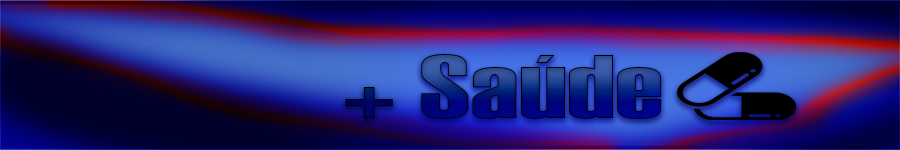
<style>
.page{position:relative;width:900px;height:150px}
.page>*{position:absolute;margin:0}
.t1{font:90px "Haettenschweiler";scale:1.5 1}
</style>
<div class="page">
<p class="t1" style="left:345px;top:54px;width:317px;height:65px">+ Saúde</p>
</div>
